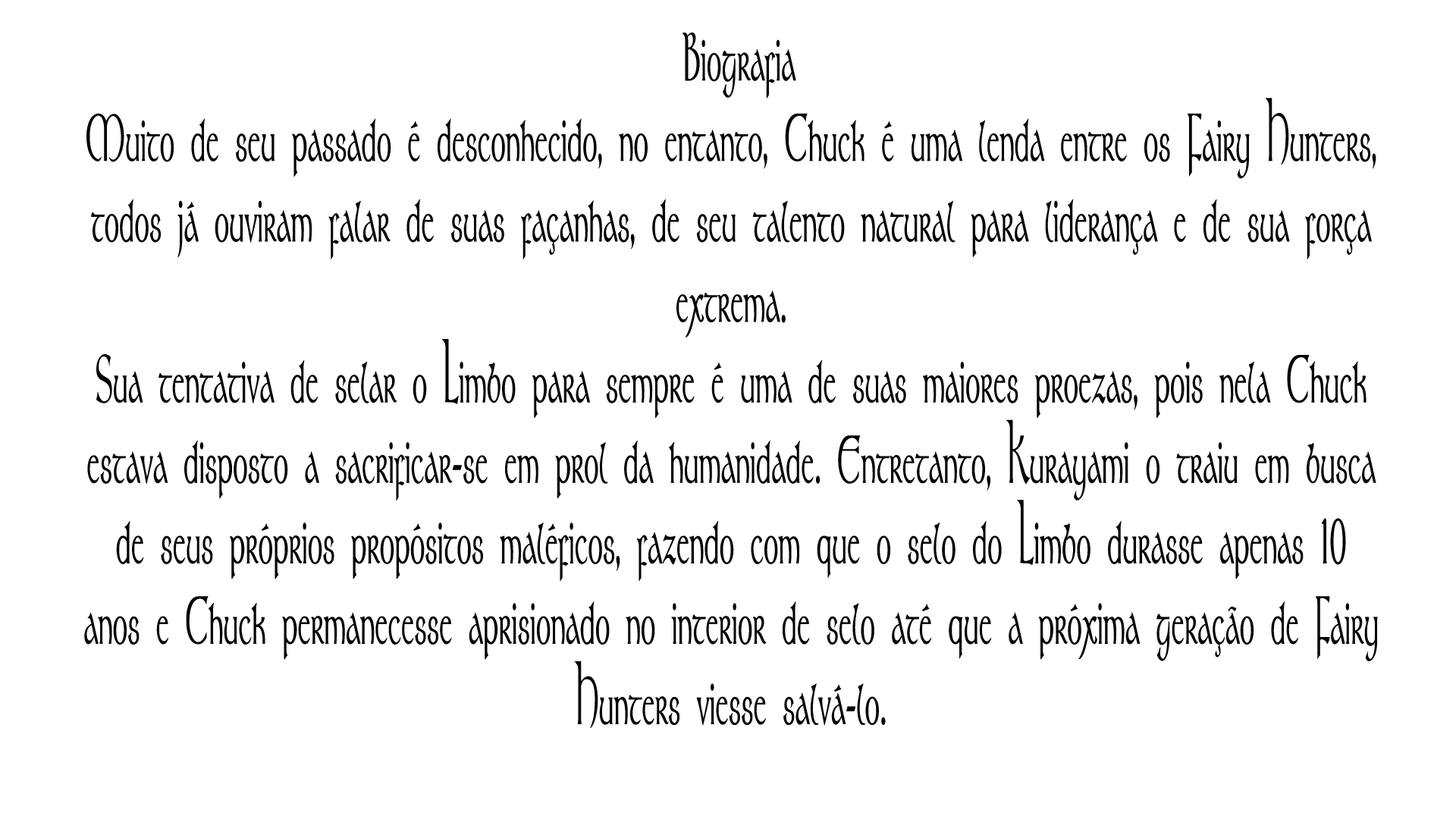
<style>
.page{position:relative;width:1456px;height:819px;background:#ffffff}
.page>*{position:absolute;margin:0}
.t1{font:67.1px "Stonehenge";color:#030303;font-weight:bold;scale:0.45 1}
</style>
<div class="page">
<p class="t1" style="left:84px;top:32px;width:1294px;height:696px;text-align:center">Biografia<br>Muito de seu passado é desconhecido, no entanto, Chuck é uma lenda entre os Fairy Hunters, <br>todos já ouviram falar de suas façanhas, de seu talento natural para liderança e de sua força <br>extrema. <br>Sua tentativa de selar o Limbo para sempre é uma de suas maiores proezas, pois nela Chuck <br>estava disposto a sacrificar-se em prol da humanidade. Entretanto, Kurayami o traiu em busca <br>de seus próprios propósitos maléficos, fazendo com que o selo do Limbo durasse apenas 10 <br>anos e Chuck permanecesse aprisionado no interior de selo até que a próxima geração de Fairy <br>Hunters viesse salvá-lo.</p>
</div>
